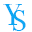
<style>
.page{position:relative;width:32px;height:32px;background:#ffffff}
.page>*{position:absolute;margin:0}
.t1{font:30px "BodoniSvtyTwoSCITCTT-Book";color:#0da6f3}
</style>
<div class="page">
<p class="t1" style="left:3px;top:4px;width:19px;height:21px">Y</p>
<p class="t1" style="left:13px;top:10px;width:13px;height:21px">S</p>
</div>
